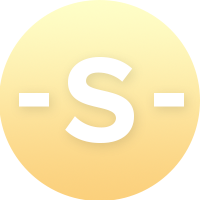
<style>
.page{position:relative;width:200px;height:200px;background:#ffffff}
.page>*{position:absolute;margin:0}
.t1{font:125px "ProximaNova-Bold";color:#ffffff}
</style>
<div class="page">
<p class="t1" style="left:65px;top:57px;width:69px;height:86px">S</p>
<p class="t1" style="left:19px;top:93px;width:30px;height:14px">-</p>
<p class="t1" style="left:154px;top:93px;width:30px;height:14px">-</p>
</div>
